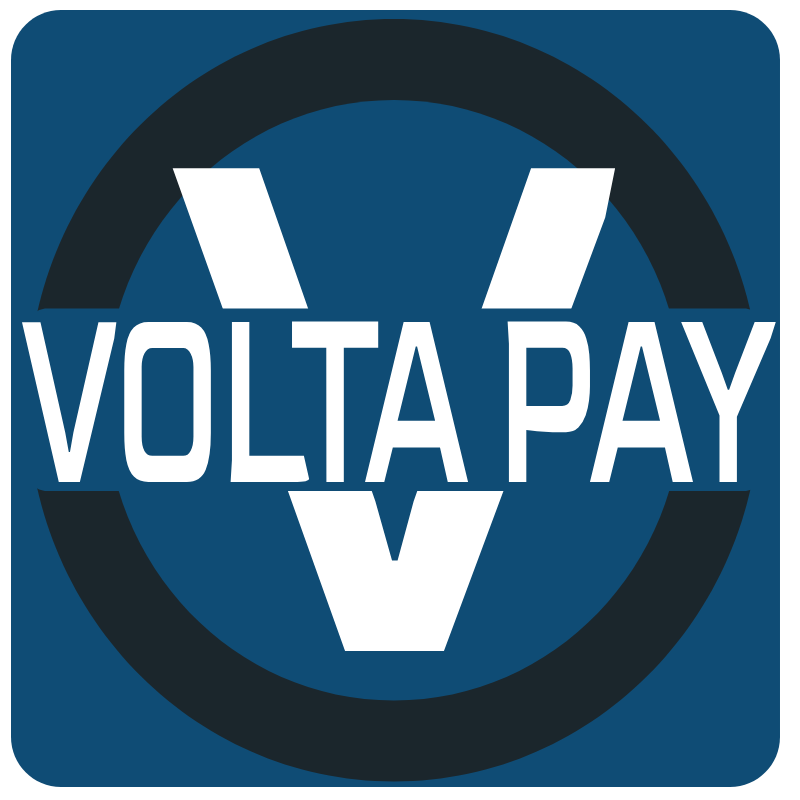
<style>
.page{position:relative;width:800px;height:800px;background:#0f4c75}
.page>*{position:absolute;margin:0}
.t1{font:822.5px "Goldman-Regular";color:#ffffff;scale:0.75 1}
.t2{font:272.3px "Goldman-Regular";color:#ffffff;scale:0.48 1}
</style>
<div class="page">
<p class="t1" style="left:172px;top:168px;width:444px;height:484px">V</p>
<p class="t2" style="left:22px;top:321px;width:754px;height:162px">VOLTA PAY</p>
</div>
